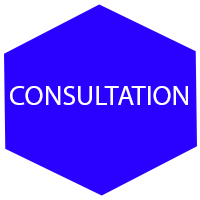
<style>
.page{position:relative;width:200px;height:200px;background:#2a00fe}
.page>*{position:absolute;margin:0}
.t1{font:28px "MyriadPro-Regular";color:#ffffff}
</style>
<div class="page">
<p class="t1" style="left:10px;top:86px;width:178px;height:19px">CONSULTATION</p>
</div>
